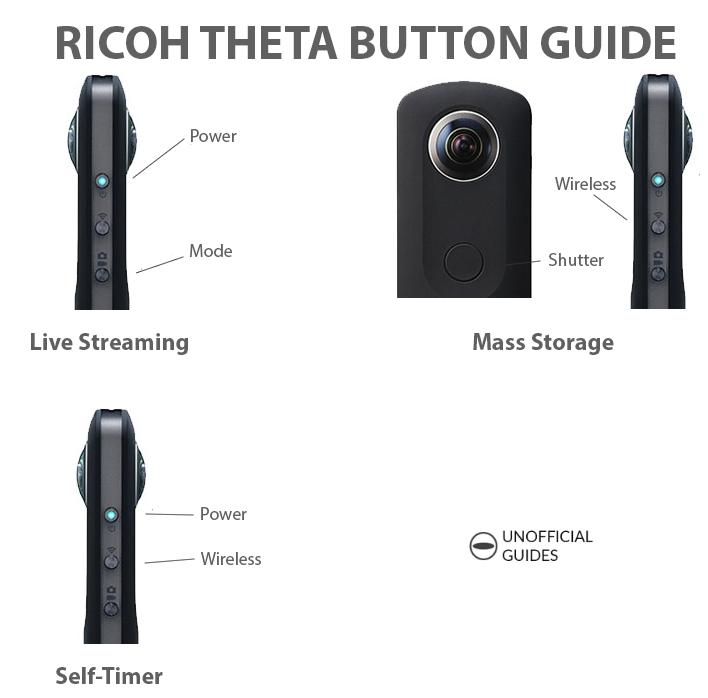
<style>
.page{position:relative;width:708px;height:698px;background:#ffffff}
.page>*{position:absolute;margin:0}
.t1{font:48px "MyriadPro-Bold";color:#606060}
.t2{font:18px "MyriadPro-Regular";color:#606060}
.t3{font:24px "MyriadPro-Bold";color:#606060}
</style>
<div class="page">
<p class="t1" style="left:57px;top:26px;width:619px;height:33px">RICOH THETA BUTTON GUIDE</p>
<p class="t2" style="left:191px;top:129px;width:46px;height:13px">Power</p>
<p class="t2" style="left:555px;top:177px;width:61px;height:13px">Wireless</p>
<p class="t2" style="left:190px;top:244px;width:42px;height:13px">Mode</p>
<p class="t2" style="left:549px;top:253px;width:55px;height:13px">Shutter</p>
<p class="t3" style="left:31px;top:333px;width:157px;height:22px">Live Streaming</p>
<p class="t3" style="left:473px;top:333px;width:141px;height:22px">Mass Storage</p>
<p class="t2" style="left:201px;top:507px;width:46px;height:13px">Power</p>
<p class="t2" style="left:201px;top:552px;width:60px;height:13px">Wireless</p>
<p class="t3" style="left:56px;top:667px;width:107px;height:17px">Self-Timer</p>
</div>
